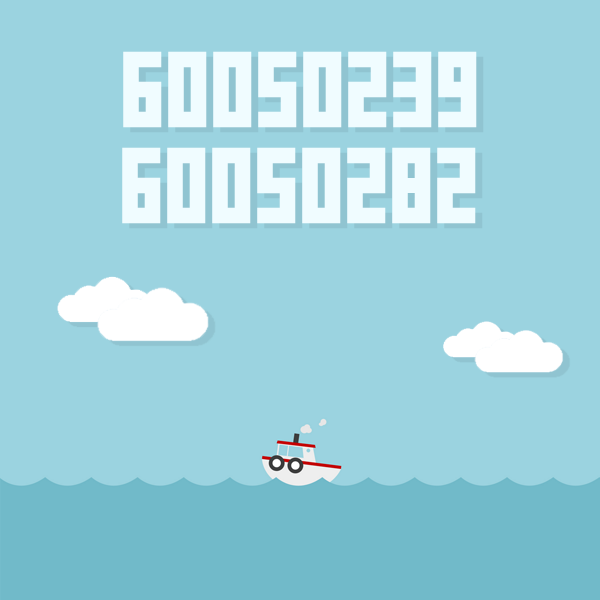
<style>
.page{position:relative;width:600px;height:600px;background:#9bd3e0}
.page>*{position:absolute;margin:0}
.t1{font:60px "FFFForward";color:#f0fcff}
</style>
<div class="page">
<p class="t1" style="left:123px;top:51px;width:354px;height:77px">60050239</p>
<p class="t1" style="left:122px;top:147px;width:354px;height:77px">60050282</p>
</div>
